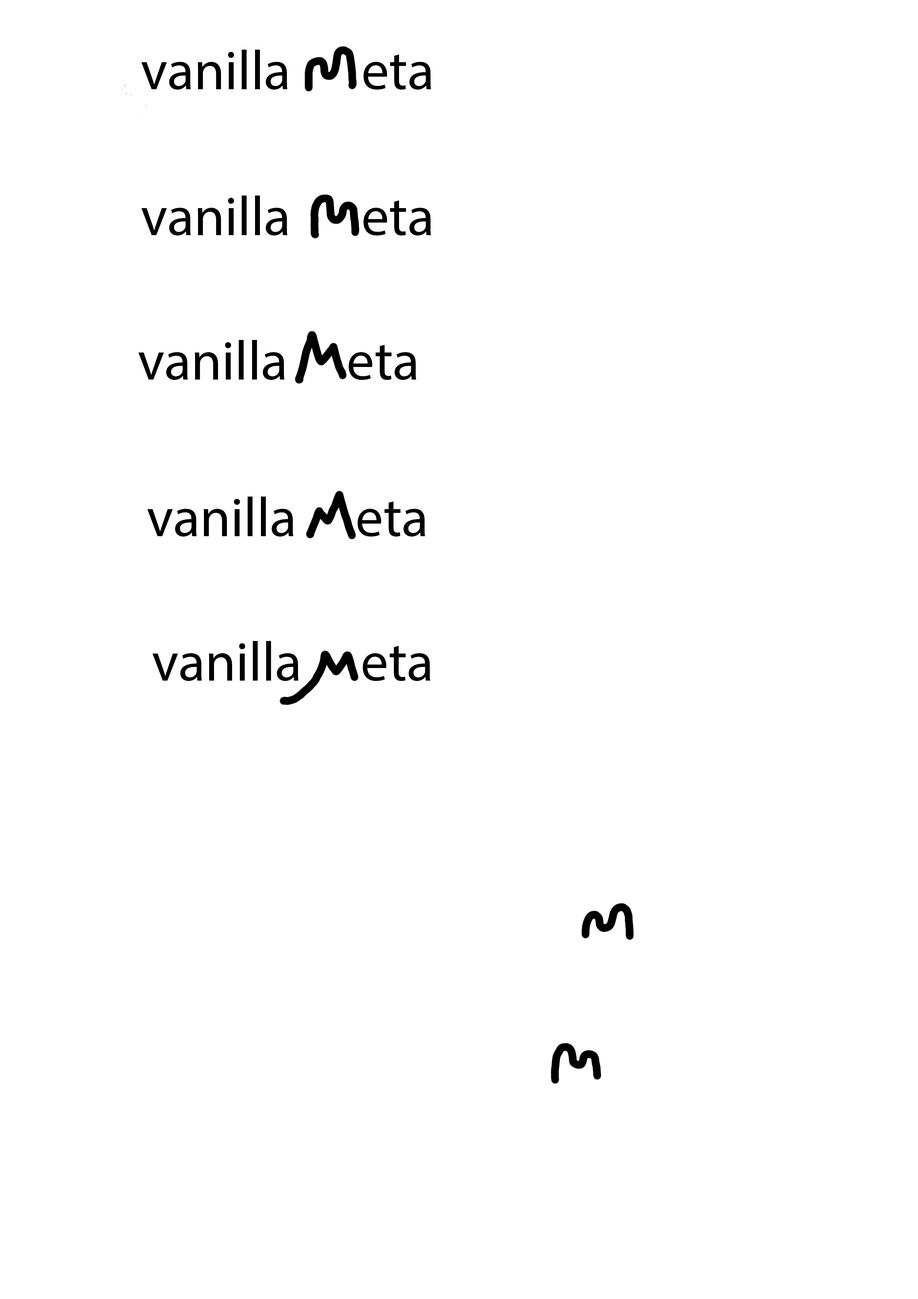
<style>
.page{position:relative;width:918px;height:1299px;background:#ffffff}
.page>*{position:absolute;margin:0}
.t1{font:55.5px "MyriadPro-Regular";color:#000000}
</style>
<div class="page">
<p class="t1" style="left:141px;top:50px;width:290px;height:40px">vanilla      eta</p>
<p class="t1" style="left:141px;top:195px;width:290px;height:40px">vanilla      eta</p>
<p class="t1" style="left:138px;top:340px;width:278px;height:40px">vanilla     eta</p>
<p class="t1" style="left:147px;top:496px;width:278px;height:40px">vanilla     eta</p>
<p class="t1" style="left:153px;top:641px;width:278px;height:40px">vanilla     eta</p>
</div>
